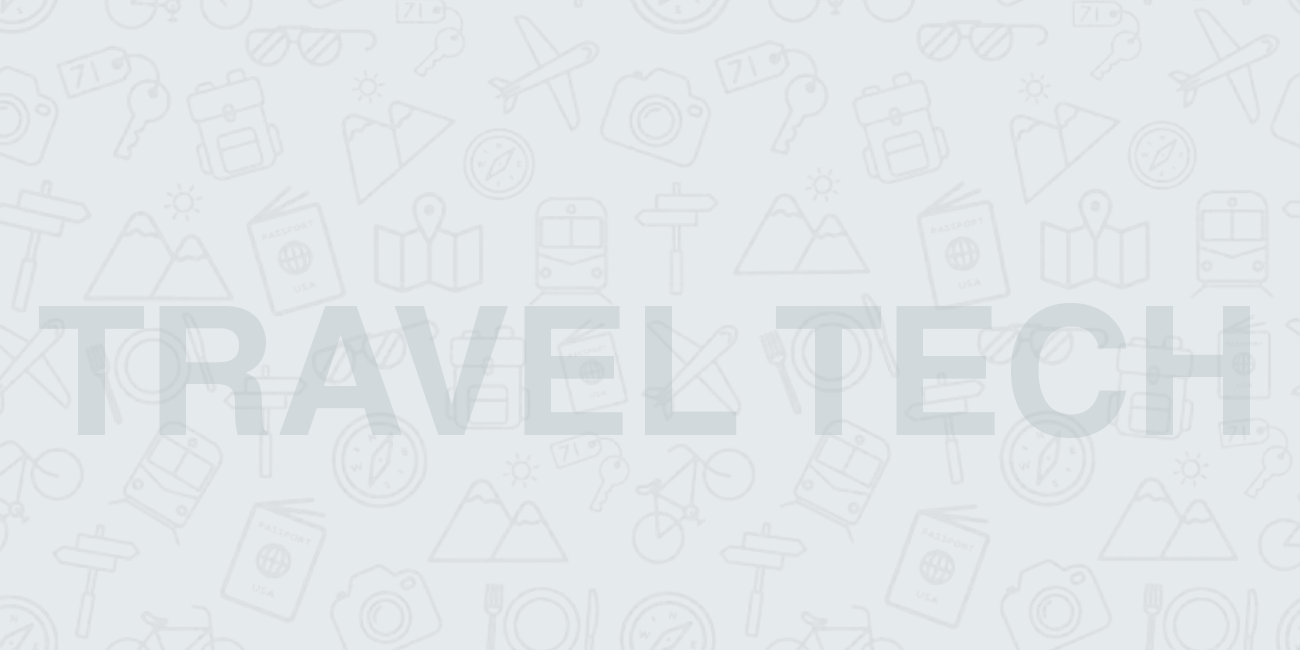
<style>
.page{position:relative;width:1300px;height:650px;background:#e5eaec}
.page>*{position:absolute;margin:0}
.t1{font:180px "HelveticaCE-Bold";color:#d2d9dc;text-transform:uppercase}
</style>
<div class="page">
<p class="t1" style="left:38px;top:302px;width:1212px;height:137px">Travel tech</p>
</div>
